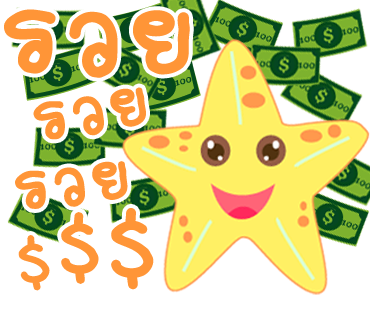
<style>
.page{position:relative;width:370px;height:320px;background:#ffffff}
.page>*{position:absolute;margin:0}
.t1{font:178px "2005_iannnnnMTV";letter-spacing:0.025em;color:#ff9537;scale:1.06 1}
.t2{font:107px "2005_iannnnnMTV";letter-spacing:0.025em;color:#ff9537;scale:1.06 1}
.t3{font:156px "2005_iannnnnMTV";letter-spacing:0.025em;color:#ff9537;scale:1.06 1}
.t4{font:138px "2005_iannnnnMTV";letter-spacing:0.025em;color:#ff9537;scale:1.06 1}
</style>
<div class="page">
<p class="t1" style="left:4px;top:9px;width:186px;height:69px">รวย</p>
<p class="t2" style="left:33px;top:87px;width:113px;height:53px;rotate:-10deg">รวย</p>
<p class="t2" style="left:15px;top:161px;width:113px;height:48px;rotate:-7deg">รวย</p>
<p class="t3" style="left:111px;top:208px;width:43px;height:82px">$</p>
<p class="t4" style="left:61px;top:212px;width:38px;height:72px">$</p>
<p class="t2" style="left:18px;top:235px;width:32px;height:56px;rotate:-6deg">$</p>
</div>
